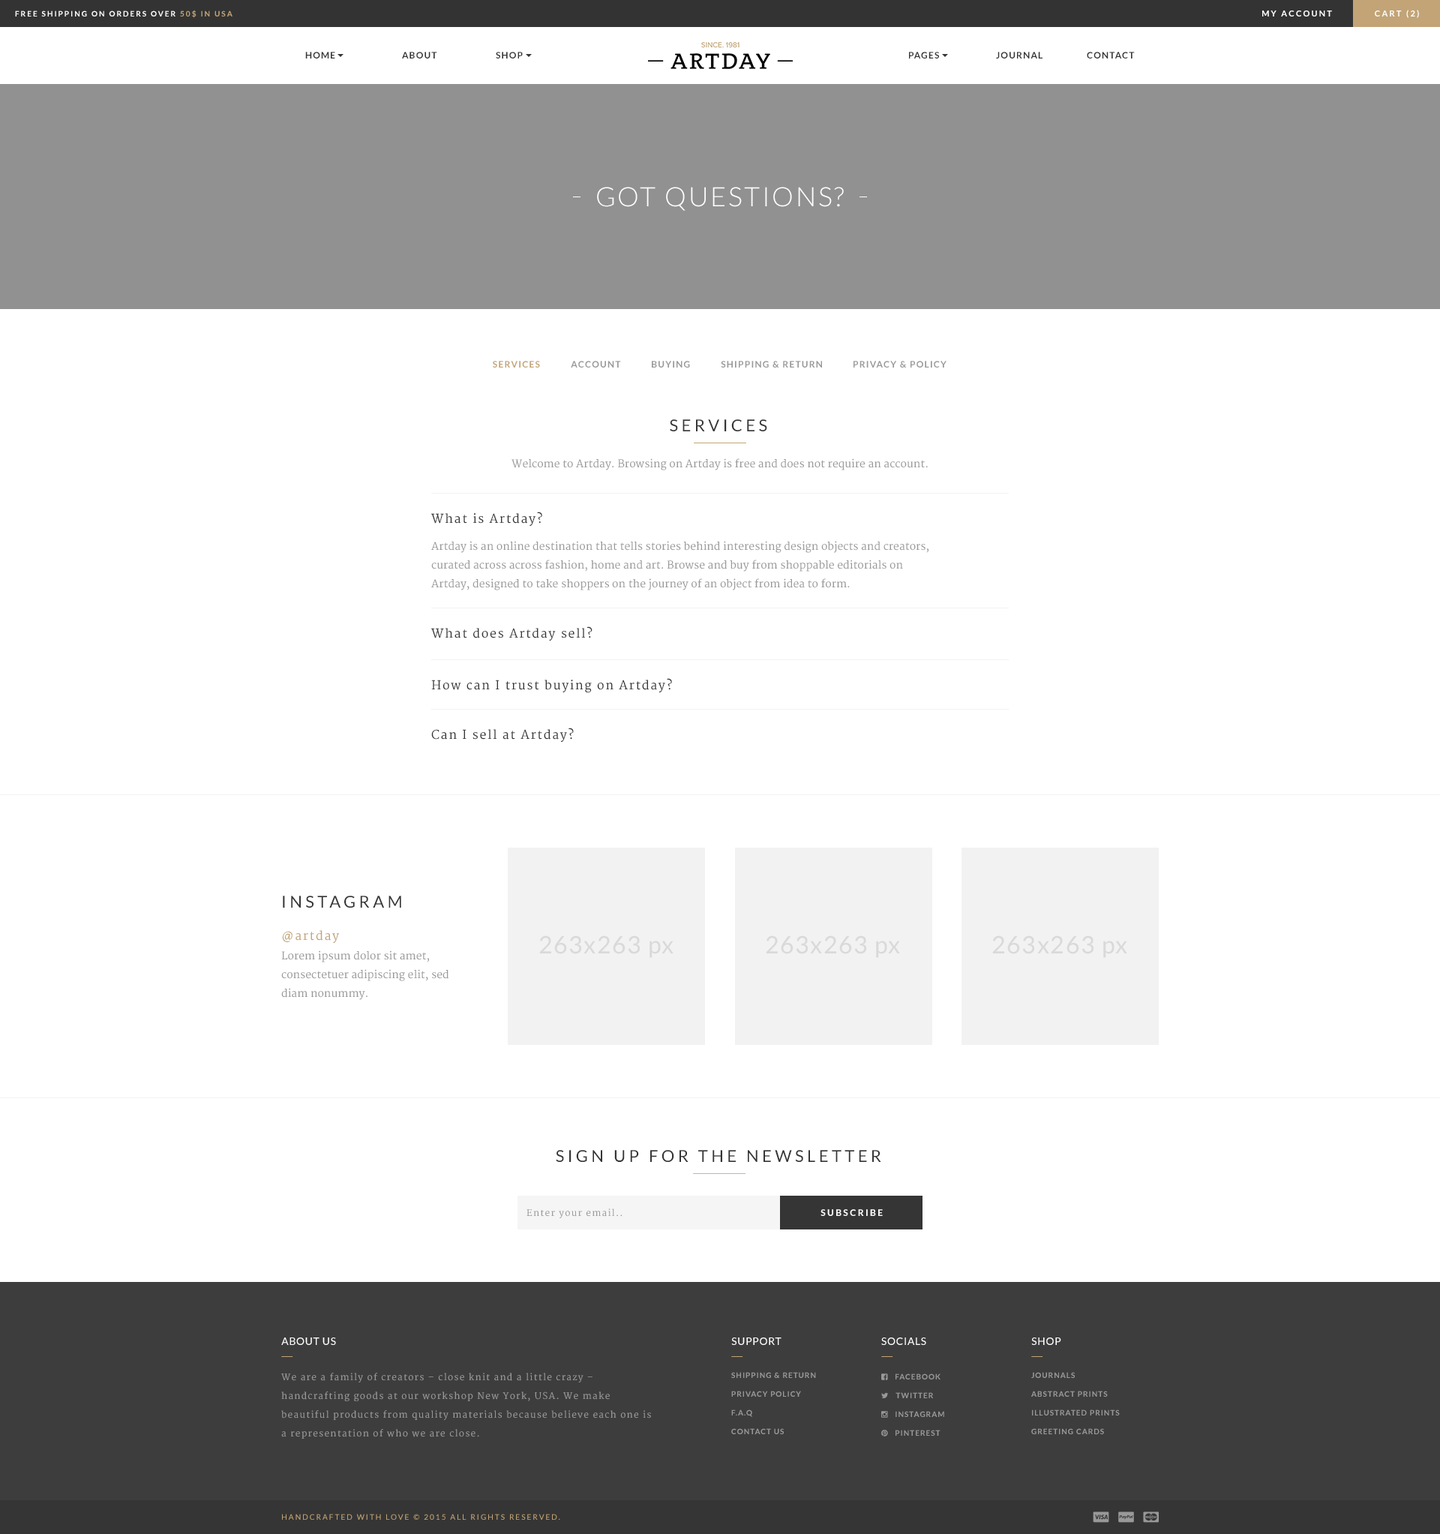
<style>
.page{position:relative;width:1440px;height:1534px;background:#ffffff}
.page>*{position:absolute;margin:0}
.t1{font:7.5px "Lato-Bold";letter-spacing:0.2em;color:#ffffff;text-transform:uppercase}
.t2{font:7.5px "Lato-Bold";letter-spacing:0.2em;color:#c2a476;text-transform:uppercase}
.t3{font:8.2px "Lato-Bold";letter-spacing:0.2em;color:#ffffff;text-transform:uppercase}
.t4{font:9px "Lato-Bold";letter-spacing:0.1em;color:#353535;text-transform:uppercase}
.t5{font:26.9px "Lato-Light";letter-spacing:0.075em;color:#ffffff;text-transform:uppercase}
.t6{font:9px "Lato-Bold";letter-spacing:0.1em;color:#c2a476;text-transform:uppercase}
.t7{font:9px "Lato-Bold";letter-spacing:0.1em;color:#999999;text-transform:uppercase}
.t8{font:16.5px "Lato-Regular";letter-spacing:0.2em;color:#353535;text-transform:uppercase}
.t9{font:10.5px "Merriweather";color:#999999}
.t10{font:12px "Merriweather";letter-spacing:0.1em;color:#353535}
.t11{font:10.5px/18.8px "Merriweather";color:#999999}
.t12{font:12.1px "Merriweather";letter-spacing:0.1em;color:#353535}
.t13{font:12px "Merriweather";letter-spacing:0.1em;color:#c2a476}
.t14{font:24px "Lato-Regular";letter-spacing:0.05em;color:#d9d9d9}
.t15{font:10.5px/18.7px "Merriweather";color:#999999}
.t16{font:16.4px "Lato-Regular";letter-spacing:0.2em;color:#353535;text-transform:uppercase}
.t17{font:9px "Merriweather";letter-spacing:0.1em;color:#999999}
.t18{font:9px "Lato-Bold";letter-spacing:0.2em;color:#ffffff;text-transform:uppercase}
.t19{font:10.6px "Lato-Regular";letter-spacing:0.05em;color:#ffffff;text-transform:uppercase}
.t20{font:9px/18.8px "Merriweather";letter-spacing:0.1em;color:#999999}
.t21{font:7.5px/18.8px "Lato-Bold";letter-spacing:0.1em;color:#999999;text-transform:uppercase}
.t22{font:7.5px "Lato-Regular";letter-spacing:0.2em;color:#c2a476;text-transform:uppercase}
</style>
<div class="page">
<p class="t1" style="left:15px;top:10px;width:217px;height:8px">FREE SHIPPING ON ORDERS OVER <span class="t2">50$ IN USA</span></p>
<p class="t3" style="left:1262px;top:10px;width:70px;height:6px">My account</p>
<p class="t3" style="left:1375px;top:10px;width:44px;height:8px">Cart (2)</p>
<p class="t4" style="left:305px;top:52px;width:30px;height:6px">Home</p>
<p class="t4" style="left:402px;top:52px;width:35px;height:6px">About</p>
<p class="t4" style="left:496px;top:52px;width:27px;height:6px">Shop</p>
<p class="t4" style="left:909px;top:52px;width:30px;height:6px">PAges</p>
<p class="t4" style="left:996px;top:52px;width:46px;height:6px">Journal</p>
<p class="t4" style="left:1087px;top:52px;width:48px;height:6px">Contact</p>
<p class="t5" style="left:597px;top:187px;width:247px;height:24px">GOT QUESTIONS?</p>
<p class="t6" style="left:493px;top:361px;width:47px;height:7px">Services</p>
<p class="t7" style="left:571px;top:361px;width:50px;height:7px">Account</p>
<p class="t7" style="left:652px;top:361px;width:38px;height:7px">Buying</p>
<p class="t7" style="left:721px;top:361px;width:101px;height:7px">Shipping &amp; Return</p>
<p class="t7" style="left:854px;top:361px;width:92px;height:7px">Privacy &amp; Policy</p>
<p class="t8" style="left:670px;top:419px;width:97px;height:12px">SERVICES</p>
<p class="t9" style="left:512px;top:458px;width:416px;height:12px">Welcome to Artday. Browsing on Artday is free and does not require an account.</p>
<p class="t10" style="left:431px;top:512px;width:111px;height:14px">What is Artday?</p>
<p class="t11" style="left:431px;top:541px;width:497px;height:49px">Artday is an online destination that tells stories behind interesting design objects and creators, curated across across fashion, home and art. Browse and buy from shoppable editorials on Artday, designed to take shoppers on the journey of an object from idea to form.</p>
<p class="t12" style="left:431px;top:626px;width:161px;height:14px">What does Artday sell?</p>
<p class="t12" style="left:431px;top:678px;width:241px;height:15px">How can I trust buying on Artday?</p>
<p class="t12" style="left:431px;top:728px;width:143px;height:14px">Can I sell at Artday?</p>
<p class="t8" style="left:283px;top:896px;width:118px;height:12px">Instagram</p>
<p class="t13" style="left:282px;top:930px;width:57px;height:13px">@artday</p>
<p class="t14" style="left:539px;top:935px;width:135px;height:23px">263x263 px</p>
<p class="t14" style="left:766px;top:935px;width:134px;height:23px">263x263 px</p>
<p class="t14" style="left:992px;top:935px;width:135px;height:23px">263x263 px</p>
<p class="t15" style="left:281px;top:950px;width:168px;height:50px">Lorem ipsum dolor sit amet, consectetuer adipiscing elit, sed <br>diam nonummy.</p>
<p class="t16" style="left:556px;top:1150px;width:325px;height:12px">Sign up for the newsletter</p>
<p class="t17" style="left:526px;top:1208px;width:96px;height:10px">Enter your email..</p>
<p class="t18" style="left:820px;top:1209px;width:63px;height:7px">Subscribe</p>
<p class="t19" style="left:281px;top:1337px;width:55px;height:8px">About Us</p>
<p class="t19" style="left:731px;top:1337px;width:51px;height:8px">Support</p>
<p class="t19" style="left:881px;top:1337px;width:45px;height:8px">socials</p>
<p class="t19" style="left:1031px;top:1337px;width:30px;height:8px">Shop</p>
<p class="t20" style="left:281px;top:1372px;width:370px;height:66px">We are a family of creators – close knit and a little crazy – handcrafting goods at our workshop New York, USA. We make beautiful products from quality materials because believe each one is a representation of who we are close.</p>
<p class="t21" style="left:731px;top:1372px;width:85px;height:62px">SHIPPING &amp; RETURN<br>PRIVACY POLICY<br>F.A.Q<br>CONTACT US</p>
<p class="t21" style="left:1031px;top:1372px;width:89px;height:62px">JOURNALS<br>ABSTRACT PRINTS<br>ILLUSTRATED PRINTS<br>GREETING CARDS</p>
<p class="t22" style="left:282px;top:1514px;width:278px;height:6px">HANDCRAFTED WITH LOVE © 2015 ALL RIGHTS RESERVED.</p>
</div>
